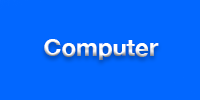
<style>
.page{position:relative;width:200px;height:100px;background:#0267ff}
.page>*{position:absolute;margin:0}
.t1{font:24px "HelveticaNeue-Bold";color:#ffffff}
</style>
<div class="page">
<p class="t1" style="left:44px;top:39px;width:115px;height:21px">Computer</p>
</div>
